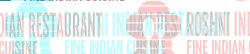
<style>
.page{position:relative;width:250px;height:54px;background:#ffffff}
.page>*{position:absolute;margin:0}
.t1{font:29.2px "FjallaOne";scale:0.53 1}
.t2{font:16.7px "FjallaOne";color:#b9ffff;scale:0.79 1}
</style>
<div class="page">
<p class="t1" style="left:65px;top:11px;width:165px;height:26px">ROSHNI INDIAN RESTAURANT</p>
<p class="t2" style="left:65px;top:40px;width:101px;height:14px">FINE INDIAN CUISINE</p>
</div>
